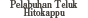
<style>
.page{position:relative;width:88px;height:18px;background:#ffffff}
.page>*{position:absolute;margin:0}
.t1{font:10px/8px "RyuminPro-ExBold";letter-spacing:-0.04em;color:#4c4843;scale:0.9 1}
</style>
<div class="page">
<p class="t1" style="left:10px;top:0px;width:68px;height:18px;text-align:center">Pelabuhan Teluk<br>Hitokappu</p>
</div>
